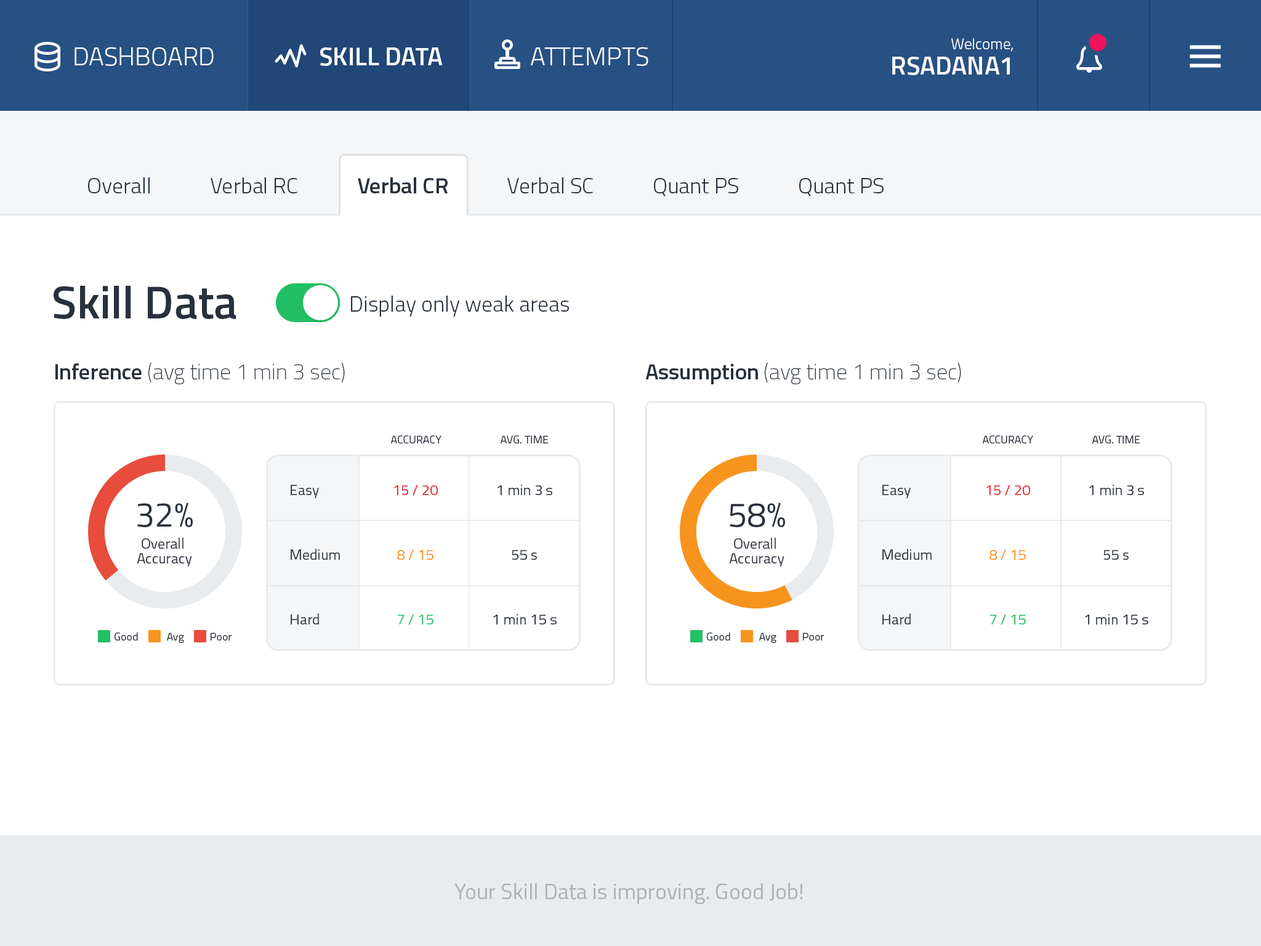
<style>
.page{position:relative;width:1261px;height:946px;background:#ffffff}
.page>*{position:absolute;margin:0}
.t1{font:15.4px/25.7px "Titillium-Light";color:#ffffff}
.t2{font:25.7px/25.7px "Titillium-Semibold";color:#ffffff;text-transform:uppercase}
.t3{font:25.7px "Titillium-Light";color:#ffffff;text-transform:uppercase}
.t4{font:25.7px "Titillium-Semibold";color:#ffffff;text-transform:uppercase}
.t5{font:22.2px "Titillium-Light";color:#28313c}
.t6{font:22.2px "Titillium-Semibold";color:#28313c}
.t7{font:46.2px "Titillium-Semibold";color:#28313c}
.t8{font:22.2px "Titillium-Thin";color:#28313c}
.t9{font:11.1px "Titillium-Regular";color:#28313c;text-transform:uppercase}
.t10{font:14.8px/64.6px "Titillium-Regular";color:#28313c}
.t11{font:14.8px/64.6px "Titillium-Regular";color:#ed1c24}
.t12{font:14.8px/64.6px "Titillium-Regular";color:#f7941d}
.t13{font:14.8px/64.6px "Titillium-Regular";color:#22c064}
.t14{font:14.8px/14.8px "Titillium-Regular";color:#28313c}
.t15{font:34.5px/22.2px "Titillium-Regular";color:#28313c}
.t16{font:14.8px/22.2px "Titillium-Regular";color:#28313c}
.t17{font:11.1px "Titillium-Regular";color:#28313c}
.t18{font:22.2px "Titillium-Regular";color:#adb1b5}
</style>
<div class="page">
<p class="t1" style="left:892px;top:38px;width:121px;height:37px;text-align:right">Welcome,<br><span class="t2">rsadana1</span></p>
<p class="t3" style="left:74px;top:47px;width:140px;height:19px">Dashboard</p>
<p class="t4" style="left:320px;top:47px;width:123px;height:19px">Skill data</p>
<p class="t3" style="left:531px;top:47px;width:117px;height:19px">Attempts</p>
<p class="t5" style="left:88px;top:177px;width:796px;height:19px">Overall            Verbal RC            <span class="t6">Verbal CR</span>            Verbal SC            Quant PS            Quant PS</p>
<p class="t7" style="left:54px;top:286px;width:182px;height:33px">Skill Data</p>
<p class="t5" style="left:351px;top:296px;width:218px;height:20px">Display only weak areas</p>
<p class="t8" style="left:55px;top:363px;width:290px;height:21px"><span class="t6">Inference </span>(avg time 1 min 3 sec)</p>
<p class="t8" style="left:645px;top:363px;width:316px;height:21px"><span class="t6">Assumption </span>(avg time 1 min 3 sec)</p>
<p class="t9" style="left:391px;top:435px;width:50px;height:8px">Accuracy</p>
<p class="t9" style="left:501px;top:435px;width:48px;height:8px">Avg. Time</p>
<p class="t9" style="left:983px;top:435px;width:50px;height:8px">Accuracy</p>
<p class="t9" style="left:1092px;top:435px;width:48px;height:8px">Avg. Time</p>
<p class="t10" style="left:291px;top:485px;width:49px;height:139px">Easy<br>Medium<br>Hard</p>
<p class="t11" style="left:394px;top:485px;width:44px;height:140px;text-align:center">15 / 20<br><span class="t12">8 / 15<br></span><span class="t13">7 / 15</span></p>
<p class="t10" style="left:493px;top:485px;width:64px;height:139px;text-align:center">1 min 3 s<br>55 s<br>1 min 15 s</p>
<p class="t10" style="left:882px;top:485px;width:50px;height:139px">Easy<br>Medium<br>Hard</p>
<p class="t11" style="left:986px;top:485px;width:45px;height:140px;text-align:center">15 / 20<br><span class="t12">8 / 15<br></span><span class="t13">7 / 15</span></p>
<p class="t10" style="left:1085px;top:485px;width:63px;height:139px;text-align:center">1 min 3 s<br>55 s<br>1 min 15 s</p>
<p class="t14" style="left:137px;top:502px;width:56px;height:64px;text-align:center"><span class="t15">32%<br></span><span class="t16">Overall <br></span>Accuracy</p>
<p class="t14" style="left:729px;top:502px;width:56px;height:64px;text-align:center"><span class="t15">58%<br></span><span class="t16">Overall <br></span>Accuracy</p>
<p class="t17" style="left:115px;top:632px;width:23px;height:8px">Good</p>
<p class="t17" style="left:167px;top:632px;width:17px;height:11px">Avg</p>
<p class="t17" style="left:211px;top:632px;width:21px;height:8px">Poor</p>
<p class="t17" style="left:707px;top:632px;width:23px;height:8px">Good</p>
<p class="t17" style="left:759px;top:632px;width:17px;height:11px">Avg</p>
<p class="t17" style="left:803px;top:632px;width:21px;height:8px">Poor</p>
<p class="t18" style="left:454px;top:883px;width:348px;height:21px">Your Skill Data is improving. Good Job!</p>
</div>
